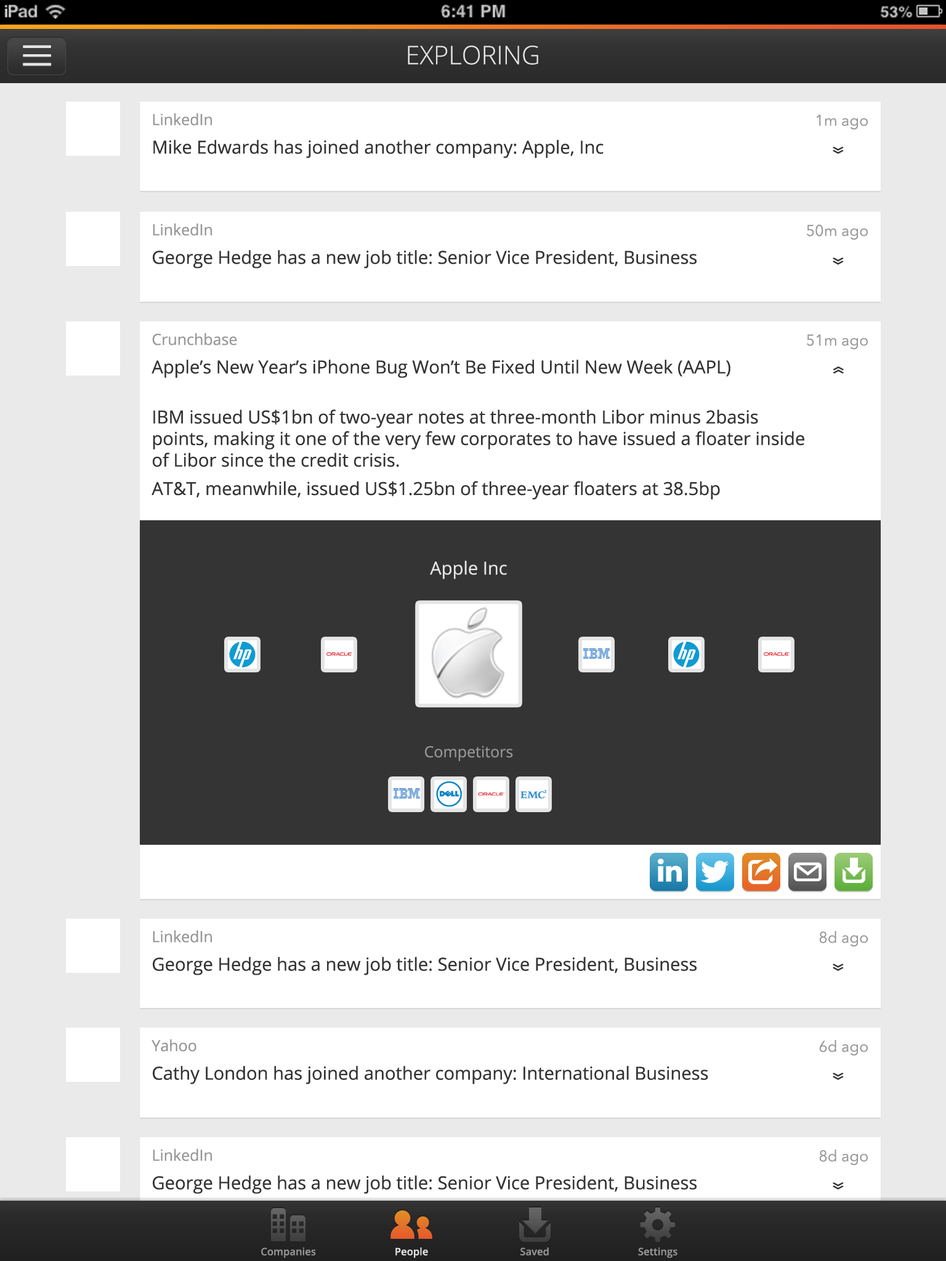
<style>
.page{position:relative;width:946px;height:1261px;background:#ffffff}
.page>*{position:absolute;margin:0}
.t1{font:25.7px "OpenSans-Light";color:#e5e5e5}
.t2{font:18px "OpenSans";color:#343434}
.t3{font:15.4px "OpenSans";color:#969696}
.t4{font:15.4px "AvenirNext-Regular";color:#969696}
.t5{font:25.7px "OpenSans";color:#343434;scale:0.64 1}
.t6{font:18px "OpenSans";color:#e5e5e5}
.t7{font:10.3px "OpenSans-Semibold";color:#969696}
.t8{font:10.3px "OpenSans-Semibold";color:#e5e5e5}
</style>
<div class="page">
<p class="t1" style="left:408px;top:46px;width:130px;height:19px">EXPLORING</p>
<p class="t2" style="left:153px;top:113px;width:450px;height:45px"><span class="t3">LinkedIn<br></span>Mike Edwards has joined another company: Apple, Inc</p>
<p class="t4" style="left:816px;top:115px;width:51px;height:15px">1m ago</p>
<p class="t5" style="left:832px;top:147px;width:11px;height:7px;rotate:90deg">»</p>
<p class="t2" style="left:153px;top:223px;width:543px;height:45px"><span class="t3">LinkedIn<br></span>George Hedge has a new job title: Senior Vice President, Business Development</p>
<p class="t4" style="left:807px;top:224px;width:60px;height:16px">50m ago</p>
<p class="t5" style="left:832px;top:257px;width:11px;height:8px;rotate:90deg">»</p>
<p class="t2" style="left:151px;top:333px;width:653px;height:166px"><span class="t3">Crunchbase<br></span>Apple’s New Year’s iPhone Bug Won’t Be Fixed Until New Week (AAPL)<br><br>IBM issued US$1bn of two-year notes at three-month Libor minus 2basis points, making it one of the very few corporates to have issued a floater inside of Libor since the credit crisis.<br>AT&amp;T, meanwhile, issued US$1.25bn of three-year floaters at 38.5bp</p>
<p class="t4" style="left:807px;top:334px;width:60px;height:16px">51m ago</p>
<p class="t5" style="left:832px;top:366px;width:11px;height:8px;rotate:-90deg">»</p>
<p class="t6" style="left:430px;top:560px;width:77px;height:19px">Apple Inc</p>
<p class="t3" style="left:425px;top:746px;width:88px;height:15px">Competitors</p>
<p class="t2" style="left:153px;top:930px;width:543px;height:45px"><span class="t3">LinkedIn<br></span>George Hedge has a new job title: Senior Vice President, Business</p>
<p class="t4" style="left:819px;top:931px;width:48px;height:16px">8d ago</p>
<p class="t5" style="left:832px;top:964px;width:11px;height:7px;rotate:90deg">»</p>
<p class="t2" style="left:151px;top:1039px;width:557px;height:45px"><span class="t3">Yahoo<br></span>Cathy London has joined another company: International Business Machines</p>
<p class="t4" style="left:819px;top:1040px;width:48px;height:16px">6d ago</p>
<p class="t5" style="left:832px;top:1073px;width:11px;height:7px;rotate:90deg">»</p>
<p class="t2" style="left:153px;top:1149px;width:543px;height:45px"><span class="t3">LinkedIn<br></span>George Hedge has a new job title: Senior Vice President, Business</p>
<p class="t4" style="left:819px;top:1149px;width:48px;height:16px">8d ago</p>
<p class="t5" style="left:832px;top:1182px;width:11px;height:7px;rotate:90deg">»</p>
<p class="t7" style="left:261px;top:1247px;width:55px;height:11px">Companies</p>
<p class="t8" style="left:395px;top:1247px;width:33px;height:11px">People</p>
<p class="t7" style="left:520px;top:1247px;width:29px;height:8px">Saved</p>
<p class="t7" style="left:638px;top:1247px;width:39px;height:11px">Settings</p>
</div>
